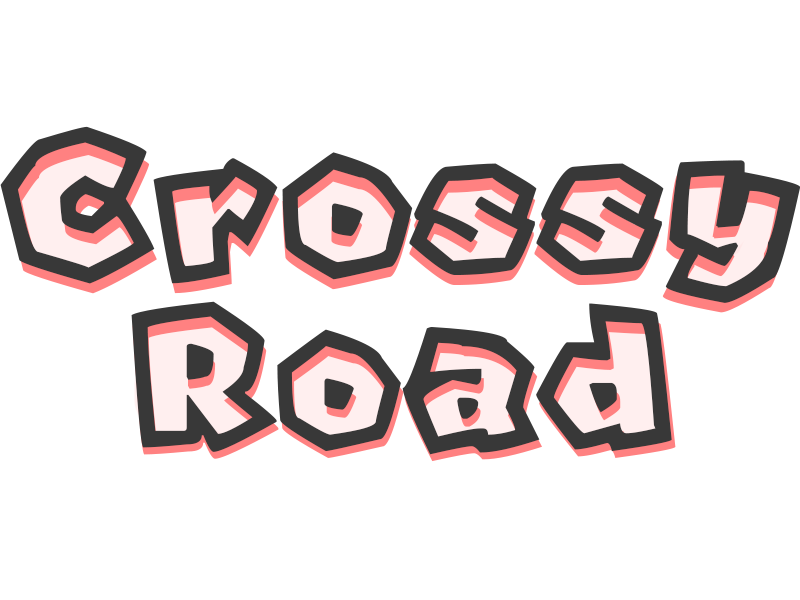
<style>
.page{position:relative;width:800px;height:600px;background:#ffffff}
.page>*{position:absolute;margin:0}
.t1{font:211.1px "SuperMario3DWorldRemake";color:#383838}
.t2{font:207.1px "SuperMario3DWorldRemake"}
.t3{font:201.5px "SuperMario3DWorldRemake";color:#383838}
.t4{font:195.9px "SuperMario3DWorldRemake";scale:1.03 1}
</style>
<div class="page">
<p class="t1" style="left:0px;top:126px;width:801px;height:177px">Crossy</p>
<p class="t2" style="left:4px;top:139px;width:792px;height:174px">Crossy</p>
<p class="t3" style="left:131px;top:301px;width:541px;height:154px">Road</p>
<p class="t4" style="left:132px;top:313px;width:544px;height:149px">Road</p>
</div>
